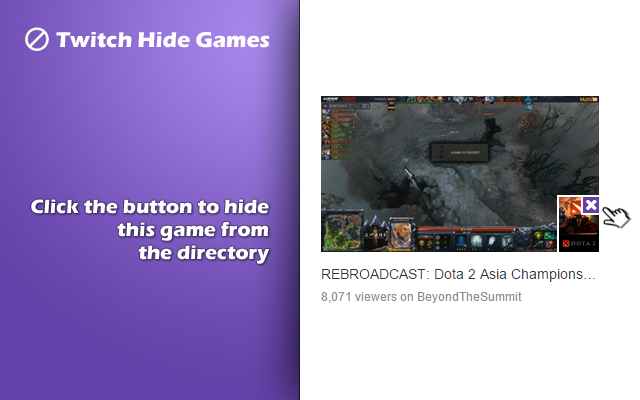
<style>
.page{position:relative;width:640px;height:400px;background:#ffffff}
.page>*{position:absolute;margin:0}
.t1{font:22px "ErasITC-Bold";color:#ffffff}
.t2{font:20px/23px "ErasITC-Bold";color:#ffffff}
</style>
<div class="page">
<p class="t1" style="left:56px;top:32px;width:214px;height:16px">Twitch Hide Games</p>
<p class="t2" style="left:31px;top:199px;width:239px;height:65px;text-align:right">Click the button to hide<br>this game from<br>the directory</p>
</div>
